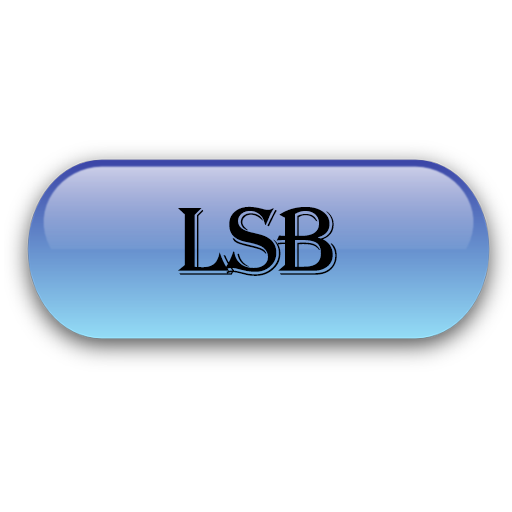
<style>
.page{position:relative;width:512px;height:512px;background:#ffffff}
.page>*{position:absolute;margin:0}
.t1{font:100px "Algerian";letter-spacing:-0.05em;color:#000000}
</style>
<div class="page">
<p class="t1" style="left:178px;top:206px;width:159px;height:70px">LSB</p>
</div>
